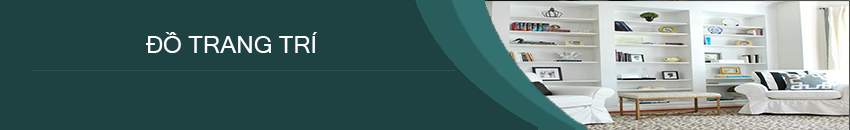
<style>
.page{position:relative;width:850px;height:130px;background:#1e4242}
.page>*{position:absolute;margin:0}
.t1{font:24px "MicrosoftSansSerif";color:#ffffff}
</style>
<div class="page">
<p class="t1" style="left:146px;top:32px;width:171px;height:21px">ĐỒ TRANG TRÍ</p>
</div>
